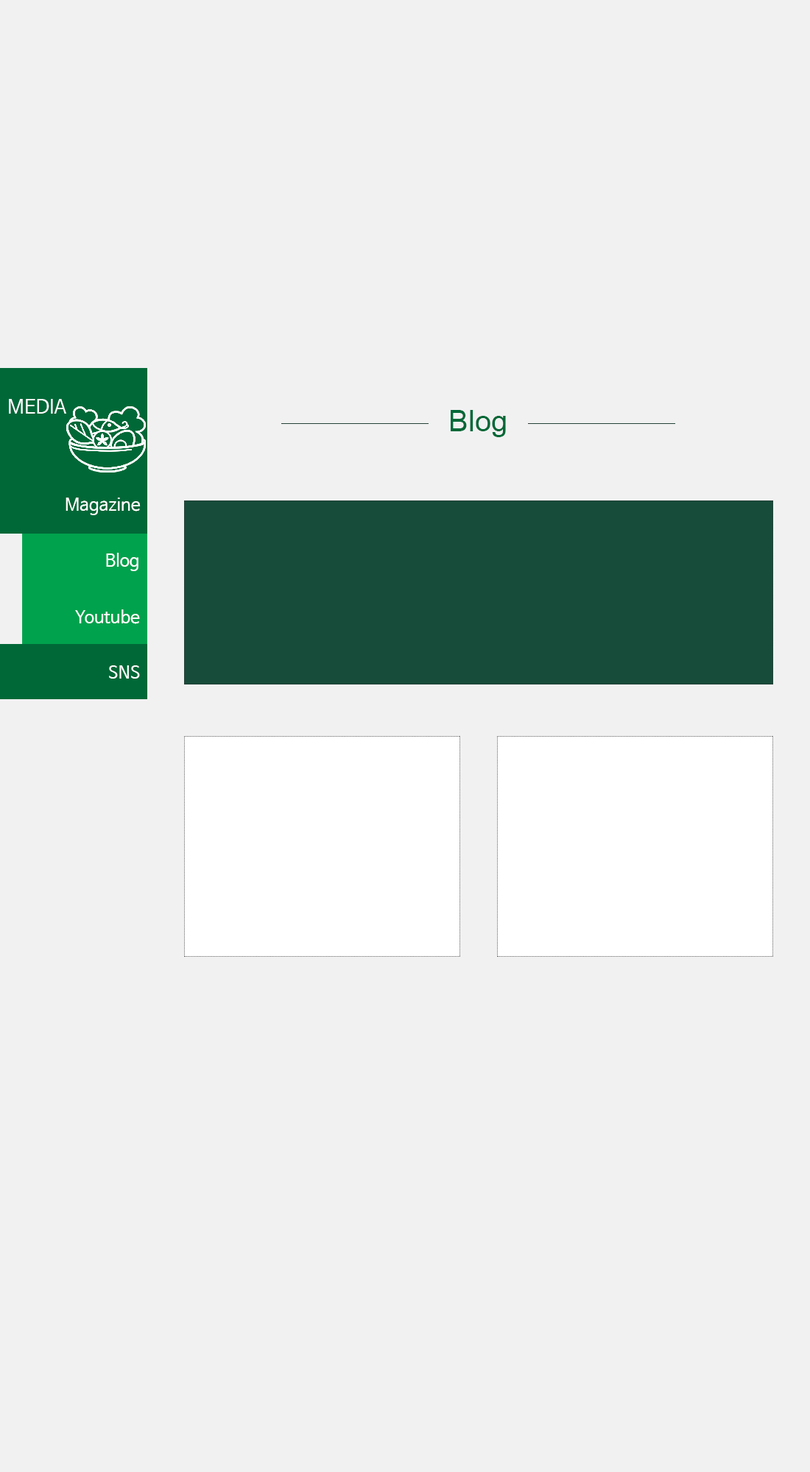
<style>
.page{position:relative;width:810px;height:1472px;background:#f1f1f1}
.page>*{position:absolute;margin:0}
.t1{font:19.1px "NanumBarunGothic";color:#ffffff}
.t2{font:29.4px "ArialMT";color:#006837}
.t3{font:16.9px "NanumBarunGothic";color:#ffffff}
</style>
<div class="page">
<p class="t1" style="left:9px;top:399px;width:57px;height:15px">MEDIA</p>
<p class="t2" style="left:451px;top:410px;width:55px;height:27px">Blog</p>
<p class="t3" style="left:66px;top:498px;width:75px;height:17px">Magazine</p>
<p class="t3" style="left:106px;top:553px;width:32px;height:18px">Blog</p>
<p class="t3" style="left:75px;top:610px;width:65px;height:14px">Youtube</p>
<p class="t3" style="left:109px;top:666px;width:31px;height:13px">SNS</p>
</div>
